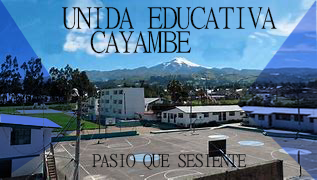
<style>
.page{position:relative;width:317px;height:180px}
.page>*{position:absolute;margin:0}
.t1{font:30px/24px "MingLiU-ExtB";letter-spacing:-0.025em;color:#060707}
.t2{font:18px "MingLiU-ExtB";letter-spacing:-0.025em;color:#0a0b0b}
.t3{font:18px "MingLiU-ExtB";letter-spacing:-0.025em;color:#ecf3f2}
</style>
<div class="page">
<p class="t1" style="left:62px;top:6px;width:215px;height:48px">UNIDA EDUCATIVA<br>  CAYAMBE</p>
<p class="t2" style="left:92px;top:153px;width:155px;height:17px"><span class="t3"><br><br></span>PASIO QUE SESIENTE</p>
</div>
